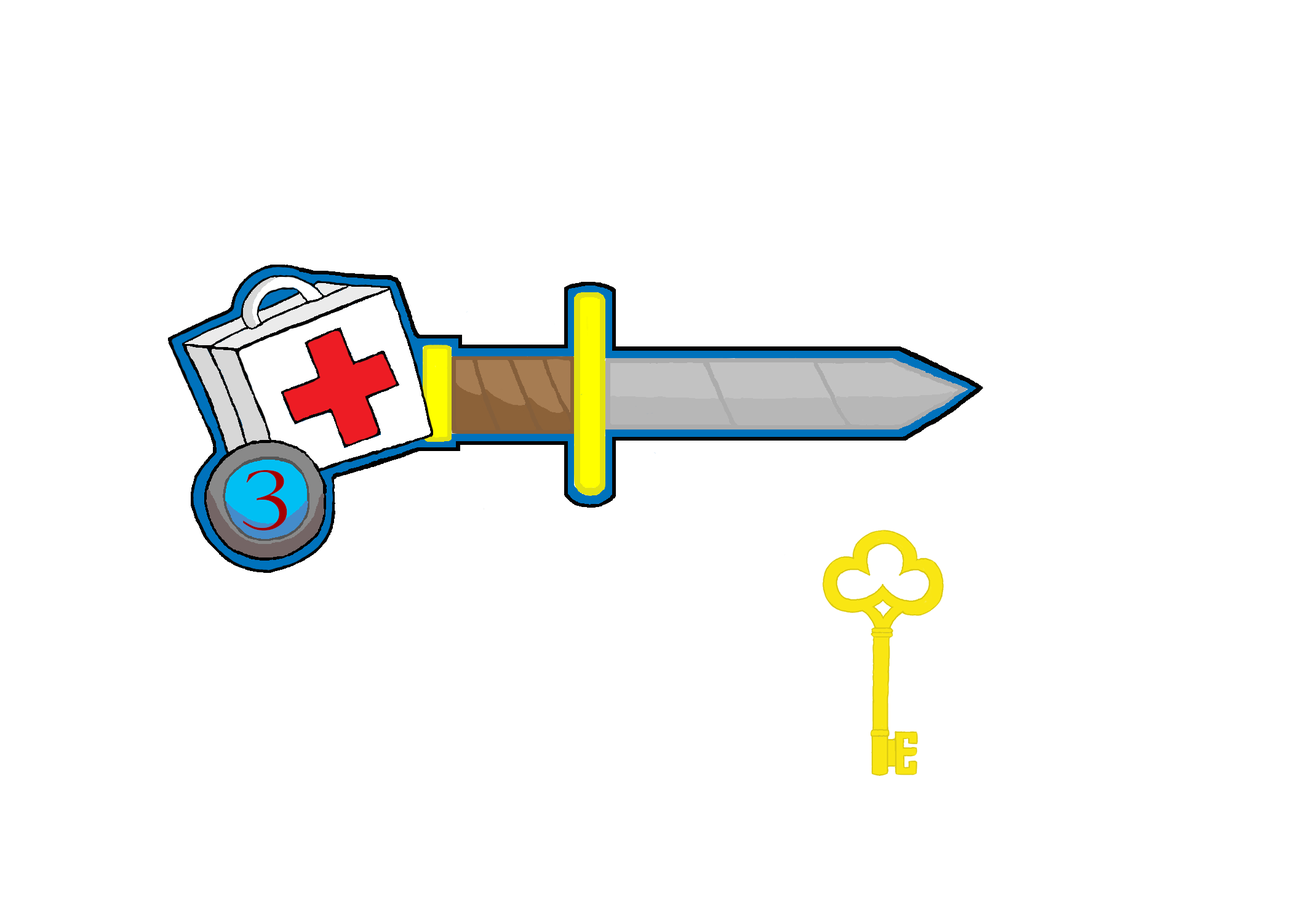
<style>
.page{position:relative;width:1292px;height:923px;background:#ffffff}
.page>*{position:absolute;margin:0}
.t1{font:80.8px "FelixTitlingMT";color:#a40101;scale:1.16 1}
</style>
<div class="page">
<p class="t1" style="left:243px;top:470px;width:44px;height:60px">3</p>
</div>
